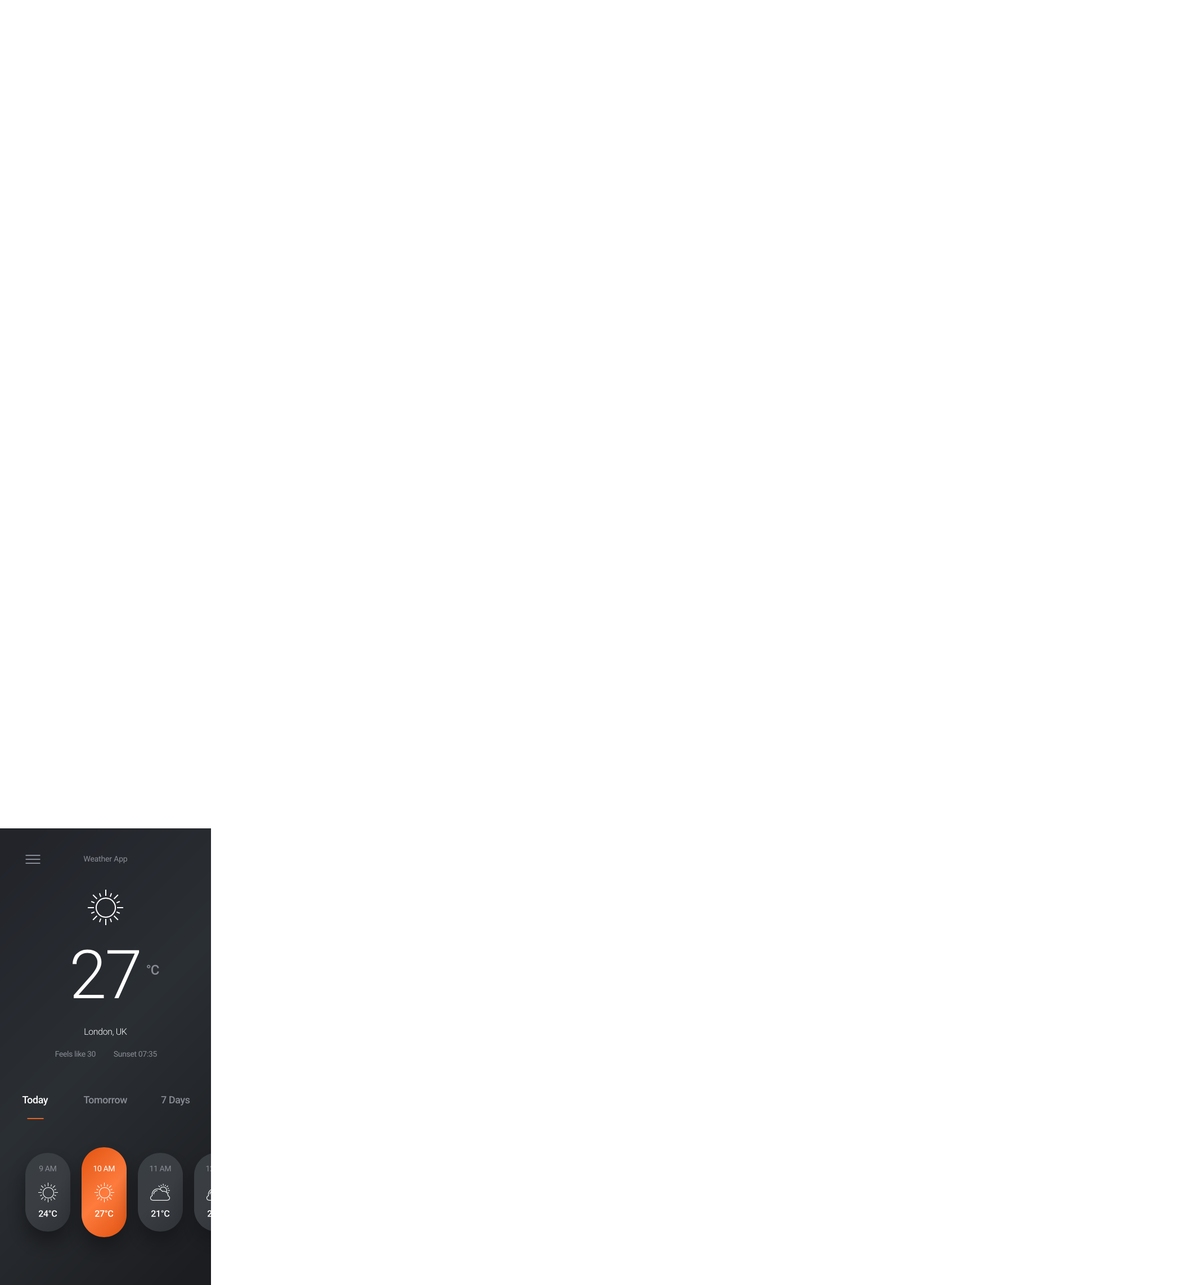
<style>
.page{position:relative;width:1190px;height:1285px;background:#ffffff}
.page>*{position:absolute;margin:0}
.t1{font:7.9px "Roboto-Regular";letter-spacing:-0.012em;color:#898c94}
.t2{font:67.5px "Roboto-Light";letter-spacing:-0.025em;color:#ffffff}
.t3{font:13.5px "Roboto-Medium";letter-spacing:-0.042em;color:#898c94}
.t4{font:9px "Roboto-Light";letter-spacing:-0.025em;color:#ffffff}
.t5{font:7.9px "Roboto-Regular";letter-spacing:-0.025em;color:#898c94}
.t6{font:10.1px "Roboto-Medium";letter-spacing:-0.025em;color:#ffffff}
.t7{font:10.1px "Roboto-Medium";letter-spacing:-0.025em;color:#898c94}
.t8{font:7.9px "Roboto-Regular";letter-spacing:-0.025em;color:#ffffff}
.t9{font:9px "Roboto-Medium";letter-spacing:-0.025em;color:#ffffff}
</style>
<div class="page">
<p class="t1" style="left:83px;top:856px;width:45px;height:7px">Weather App</p>
<p class="t2" style="left:73px;top:950px;width:67px;height:48px">27</p>
<p class="t3" style="left:147px;top:965px;width:12px;height:10px">°C</p>
<p class="t4" style="left:84px;top:1028px;width:43px;height:9px">London, UK</p>
<p class="t5" style="left:55px;top:1051px;width:41px;height:7px">Feels like 30</p>
<p class="t5" style="left:114px;top:1051px;width:43px;height:7px">Sunset 07:35</p>
<p class="t6" style="left:22px;top:1096px;width:26px;height:10px">Today</p>
<p class="t7" style="left:83px;top:1096px;width:45px;height:8px">Tomorrow</p>
<p class="t7" style="left:161px;top:1096px;width:29px;height:10px">7 Days</p>
<p class="t5" style="left:39px;top:1166px;width:17px;height:6px">9 AM</p>
<p class="t8" style="left:93px;top:1166px;width:22px;height:6px">10 AM</p>
<p class="t5" style="left:150px;top:1166px;width:21px;height:6px">11 AM</p>
<p class="t9" style="left:38px;top:1210px;width:19px;height:7px">24°C</p>
<p class="t9" style="left:94px;top:1210px;width:20px;height:7px">27°C</p>
<p class="t9" style="left:151px;top:1210px;width:19px;height:7px">21°C</p>
</div>
